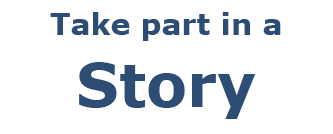
<style>
.page{position:relative;width:333px;height:134px;background:#ffffff}
.page>*{position:absolute;margin:0}
.t1{font:30px "Verdana-Bold";color:#2d4d74}
.t2{font:60px "Verdana-Bold";color:#2d4d74}
</style>
<div class="page">
<p class="t1" style="left:50px;top:12px;width:231px;height:107px;text-align:center">Take part in a<br><span class="t2">Story</span></p>
</div>
